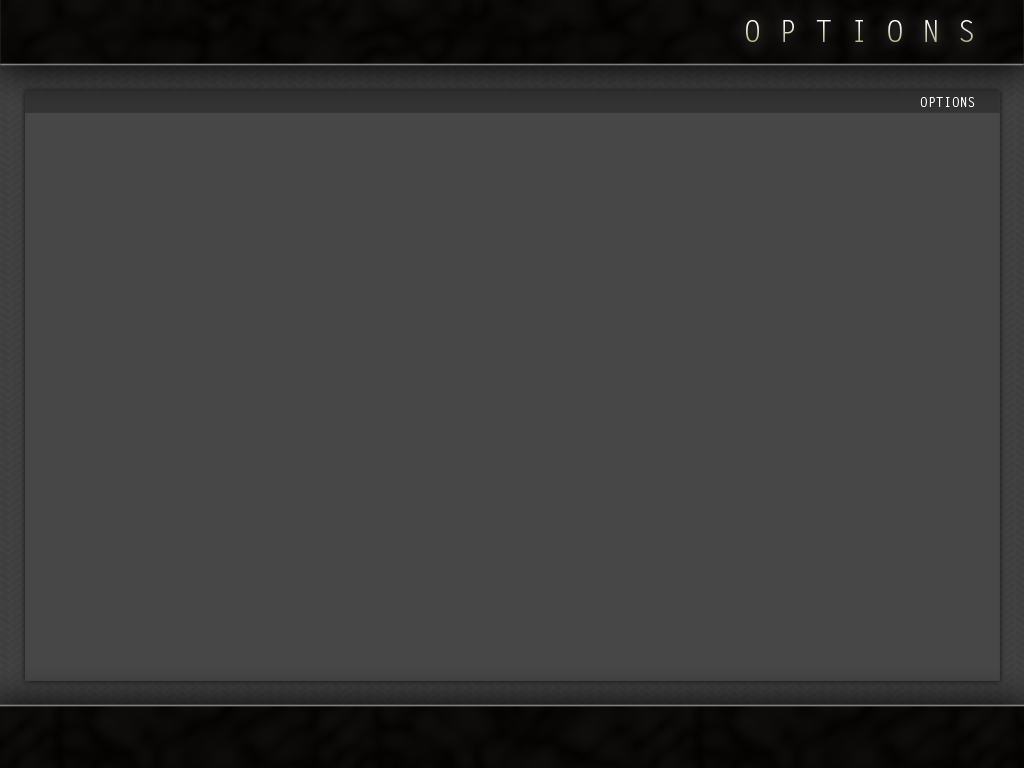
<style>
.page{position:relative;width:1024px;height:768px;background:#474747}
.page>*{position:absolute;margin:0}
.t1{font:29.7px "LetterGothicStd"}
.t2{font:13.2px "LetterGothicStd";color:#ffffff}
</style>
<div class="page">
<p class="t1" style="left:746px;top:20px;width:227px;height:22px">O P T I O N S</p>
<p class="t2" style="left:920px;top:97px;width:55px;height:10px">OPTIONS</p>
</div>
